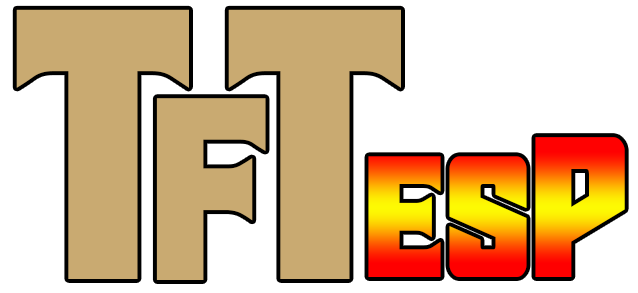
<style>
.page{position:relative;width:638px;height:293px;background:#ffffff}
.page>*{position:absolute;margin:0}
.t1{font:385px "StarGuard";color:#c9aa71}
.t2{font:260px "StarGuard";color:#c9aa71}
.t3{font:200px "StarGuard"}
</style>
<div class="page">
<p class="t1" style="left:16px;top:9px;width:173px;height:270px">T</p>
<p class="t2" style="left:156px;top:98px;width:110px;height:182px">F</p>
<p class="t3" style="left:368px;top:137px;width:257px;height:140px">esP</p>
</div>
